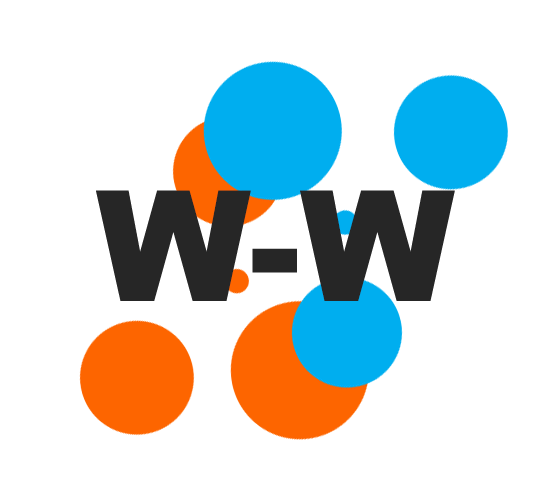
<style>
.page{position:relative;width:552px;height:492px;background:#ffffff}
.page>*{position:absolute;margin:0}
.t1{font:154.4px "Arial-Black";color:#262626}
</style>
<div class="page">
<p class="t1" style="left:96px;top:190px;width:359px;height:111px">W-W</p>
</div>
